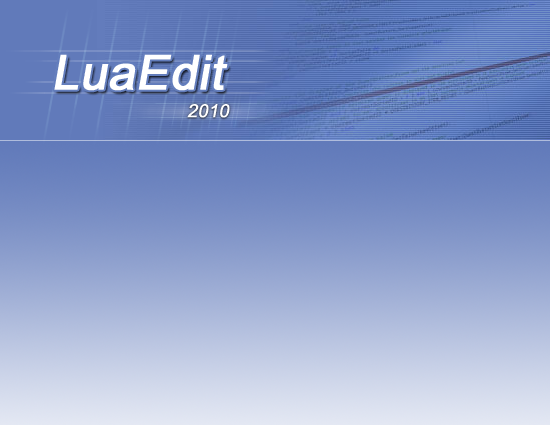
<style>
.page{position:relative;width:550px;height:425px}
.page>*{position:absolute;margin:0}
.t1{font:48px "ArialMT";color:#ffffff;font-weight:bold;font-style:italic}
.t2{font:18px "ArialMT";color:#ffffff;font-weight:bold;font-style:italic}
</style>
<div class="page">
<p class="t1" style="left:54px;top:54px;width:174px;height:37px">LuaEdit</p>
<p class="t1" style="left:54px;top:54px;width:174px;height:37px">LuaEdit</p>
<p class="t2" style="left:187px;top:104px;width:43px;height:14px">2010</p>
</div>
